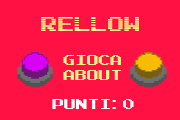
<style>
.page{position:relative;width:180px;height:120px;background:#ff1243}
.page>*{position:absolute;margin:0}
.t1{font:17px "ArcadeInterlaced";color:#fff48a}
.t2{font:12px "ArcadeNormal";color:#fff48a}
.t3{font:12px "ArcadeNormal";color:#ffffff}
</style>
<div class="page">
<p class="t1" style="left:41px;top:17px;width:98px;height:14px">RELLOW</p>
<p class="t2" style="left:63px;top:55px;width:58px;height:10px">GIOCA</p>
<p class="t2" style="left:63px;top:70px;width:58px;height:10px">ABOUT</p>
<p class="t3" style="left:52px;top:99px;width:82px;height:10px">PUNTI:0</p>
</div>
